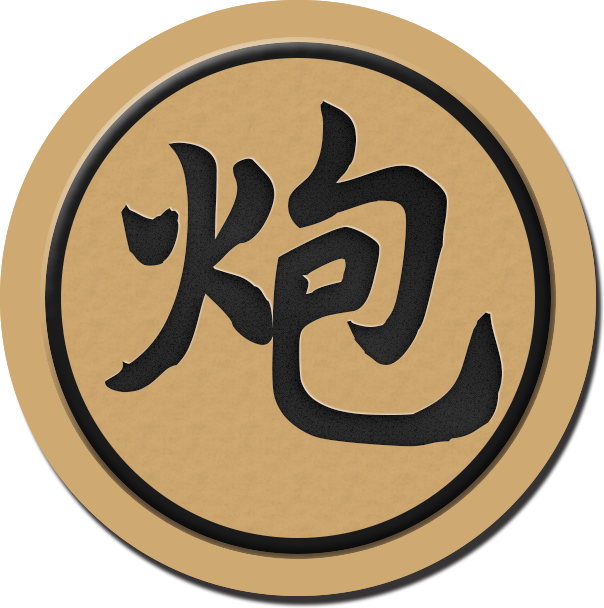
<style>
.page{position:relative;width:604px;height:608px;background:#ffffff}
.page>*{position:absolute;margin:0}
.t1{font:416.7px "AaYuwenlaoshidezi";letter-spacing:0.04em;color:#1b1b1b}
</style>
<div class="page">
<p class="t1" style="left:105px;top:101px;width:397px;height:346px">炮</p>
<p class="t1" style="left:105px;top:101px;width:397px;height:346px">炮</p>
<p class="t1" style="left:105px;top:101px;width:397px;height:346px">炮</p>
<p class="t1" style="left:105px;top:101px;width:397px;height:346px">炮</p>
<p class="t1" style="left:105px;top:101px;width:397px;height:346px">炮</p>
</div>
